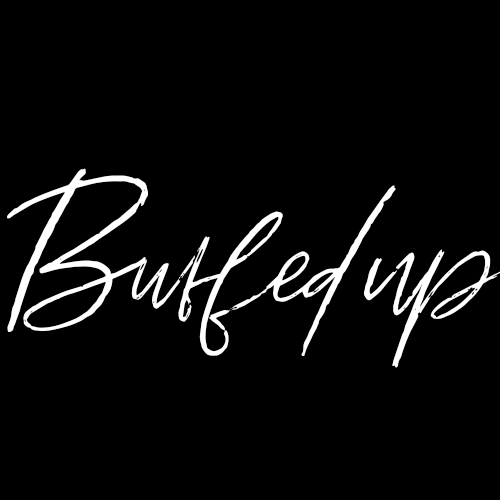
<style>
.page{position:relative;width:500px;height:500px;background:#000000}
.page>*{position:absolute;margin:0}
.t1{font:401.5px "AngelenoBrushScript-Regular";color:#ffffff}
</style>
<div class="page">
<p class="t1" style="left:7px;top:168px;width:494px;height:200px">Buffedup</p>
</div>
